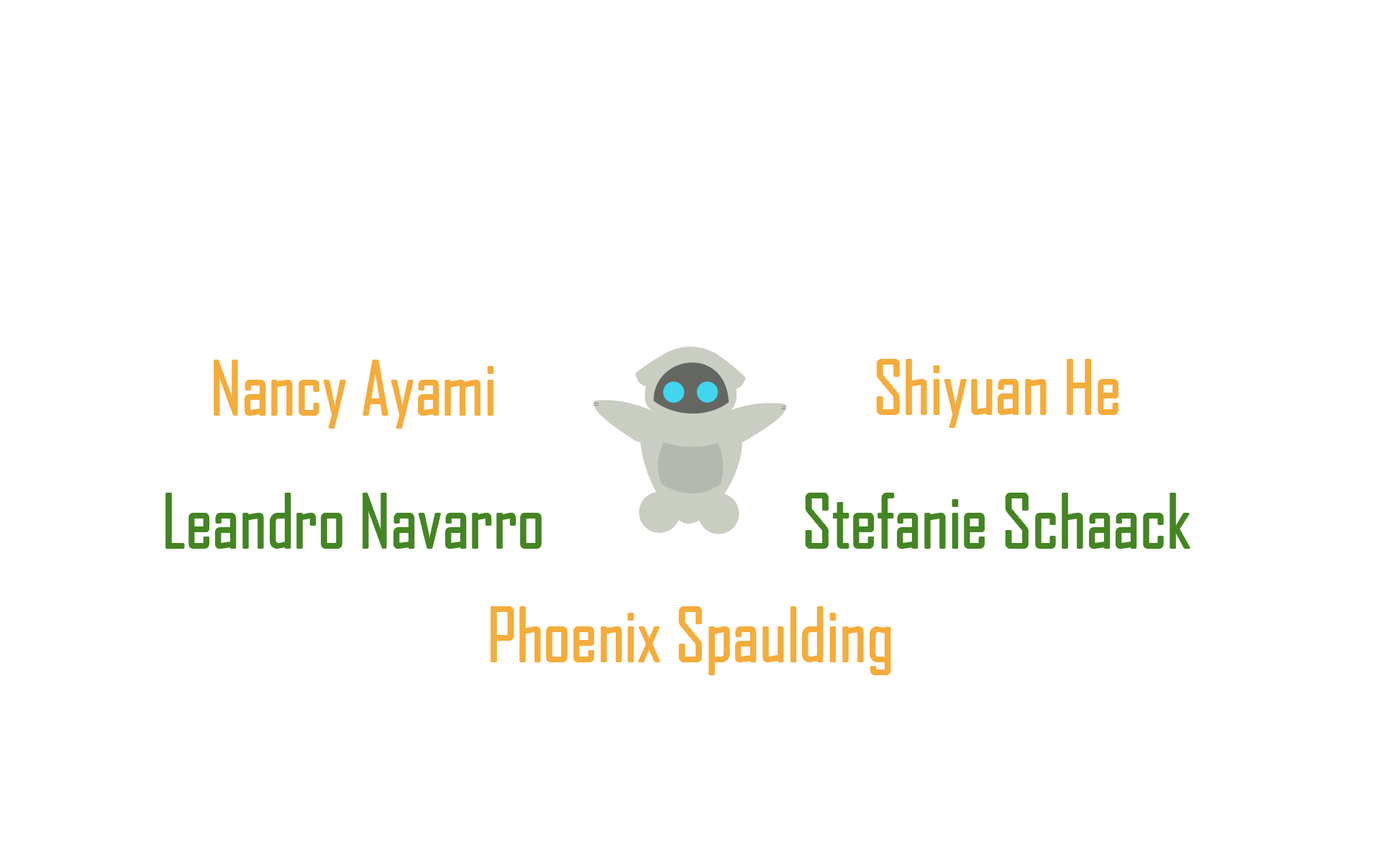
<style>
.page{position:relative;width:1381px;height:863px;background:#ffffff}
.page>*{position:absolute;margin:0}
.t1{font:71.9px "AgencyFB-Reg";color:#f4ac3b}
.t2{font:71.9px "AgencyFB-Reg";color:#448523}
</style>
<div class="page">
<p class="t1" style="left:214px;top:360px;width:280px;height:68px">Nancy Ayami</p>
<p class="t1" style="left:877px;top:360px;width:241px;height:67px">Shiyuan He</p>
<p class="t2" style="left:166px;top:494px;width:375px;height:54px">Leandro Navarro</p>
<p class="t2" style="left:806px;top:494px;width:384px;height:54px">Stefanie Schaack</p>
<p class="t1" style="left:491px;top:607px;width:400px;height:68px">Phoenix Spaulding</p>
</div>
